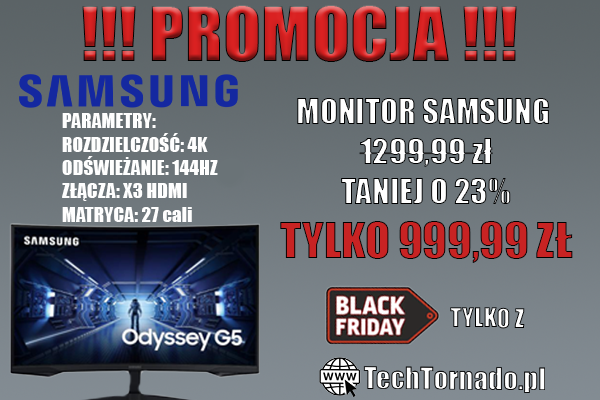
<style>
.page{position:relative;width:600px;height:400px}
.page>*{position:absolute;margin:0}
.t1{font:70.4px "Impact"}
.t2{font:33px "Impact";color:#ffffff}
.t3{font:45.5px "Impact";color:#c82323;text-transform:uppercase}
.t4{font:19.5px "Impact";color:#fefefe}
</style>
<div class="page">
<p class="t1" style="left:82px;top:5px;width:435px;height:57px">!!! PROMOCJA !!!</p>
<p class="t2" style="left:280px;top:98px;width:293px;height:165px;text-align:center">MONITOR SAMSUNG <br>1299,99 zł<br>TANIEJ O 23%<br><span class="t3">TYLKO 999,99 zł</span></p>
<p class="t4" style="left:62px;top:113px;width:156px;height:109px">PARAMETRY:<br>ROZDZIELCZOŚĆ: 4K<br>ODŚWIEŻANIE: 144HZ<br>ZŁĄCZA: X3 HDMI<br>MATRYCA: 27 cali</p>
</div>
